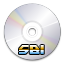
<style>
.page{position:relative;width:64px;height:64px;background:#ffffff}
.page>*{position:absolute;margin:0}
.t1{font:14px "Uranium"}
</style>
<div class="page">
<p class="t1" style="left:19px;top:45px;width:25px;height:9px">SBI</p>
</div>
